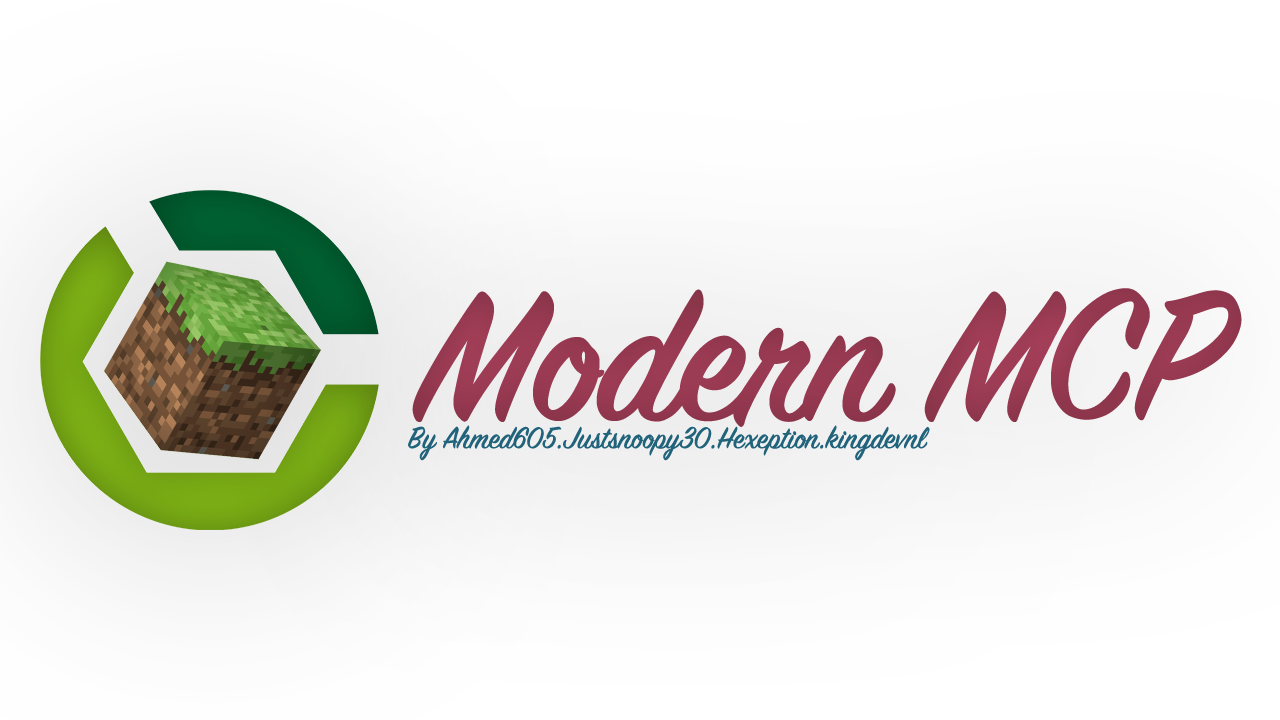
<style>
.page{position:relative;width:1280px;height:720px}
.page>*{position:absolute;margin:0}
.t1{font:200px "SignPainter-HouseScript";color:#973951}
.t2{font:33.3px "SignPainter-HouseScript";color:#21637b}
</style>
<div class="page">
<p class="t1" style="left:412px;top:288px;width:830px;height:139px">Modern MCP</p>
<p class="t2" style="left:408px;top:425px;width:522px;height:36px">By Ahmed605.Justsnoopy30.Hexeption.kingdevnl</p>
</div>
